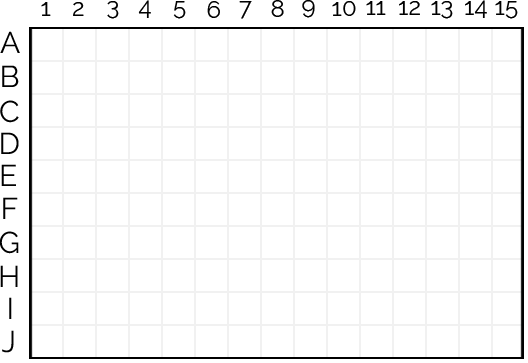
<style>
.page{position:relative;width:528px;height:363px;background:#ffffff}
.page>*{position:absolute;margin:0}
.t1{font:24px "Raleway-Regular";color:#000000}
.t2{font:30px "Raleway-Regular";color:#000000}
</style>
<div class="page">
<p class="t1" style="left:41px;top:2px;width:10px;height:14px">1</p>
<p class="t1" style="left:73px;top:2px;width:11px;height:14px">2</p>
<p class="t1" style="left:107px;top:1px;width:12px;height:18px">3</p>
<p class="t1" style="left:138px;top:0px;width:13px;height:18px">4</p>
<p class="t1" style="left:173px;top:1px;width:13px;height:18px">5</p>
<p class="t1" style="left:207px;top:1px;width:13px;height:17px">6</p>
<p class="t1" style="left:239px;top:1px;width:13px;height:18px">7</p>
<p class="t1" style="left:271px;top:0px;width:13px;height:17px">8</p>
<p class="t1" style="left:302px;top:0px;width:13px;height:18px">9</p>
<p class="t1" style="left:332px;top:1px;width:24px;height:15px">10</p>
<p class="t1" style="left:366px;top:1px;width:20px;height:14px">11</p>
<p class="t1" style="left:399px;top:1px;width:21px;height:14px">12</p>
<p class="t1" style="left:431px;top:1px;width:22px;height:18px">13</p>
<p class="t1" style="left:465px;top:0px;width:22px;height:18px">14</p>
<p class="t1" style="left:495px;top:1px;width:23px;height:18px">15</p>
<p class="t2" style="left:0px;top:31px;width:20px;height:22px">A</p>
<p class="t2" style="left:2px;top:65px;width:17px;height:22px">B</p>
<p class="t2" style="left:0px;top:100px;width:19px;height:23px">C</p>
<p class="t2" style="left:1px;top:132px;width:18px;height:22px">D</p>
<p class="t2" style="left:1px;top:164px;width:15px;height:22px">E</p>
<p class="t2" style="left:3px;top:197px;width:15px;height:22px">F</p>
<p class="t2" style="left:0px;top:231px;width:19px;height:23px">G</p>
<p class="t2" style="left:0px;top:265px;width:18px;height:22px">H</p>
<p class="t2" style="left:9px;top:297px;width:3px;height:22px">I</p>
<p class="t2" style="left:2px;top:330px;width:12px;height:23px">J</p>
</div>
